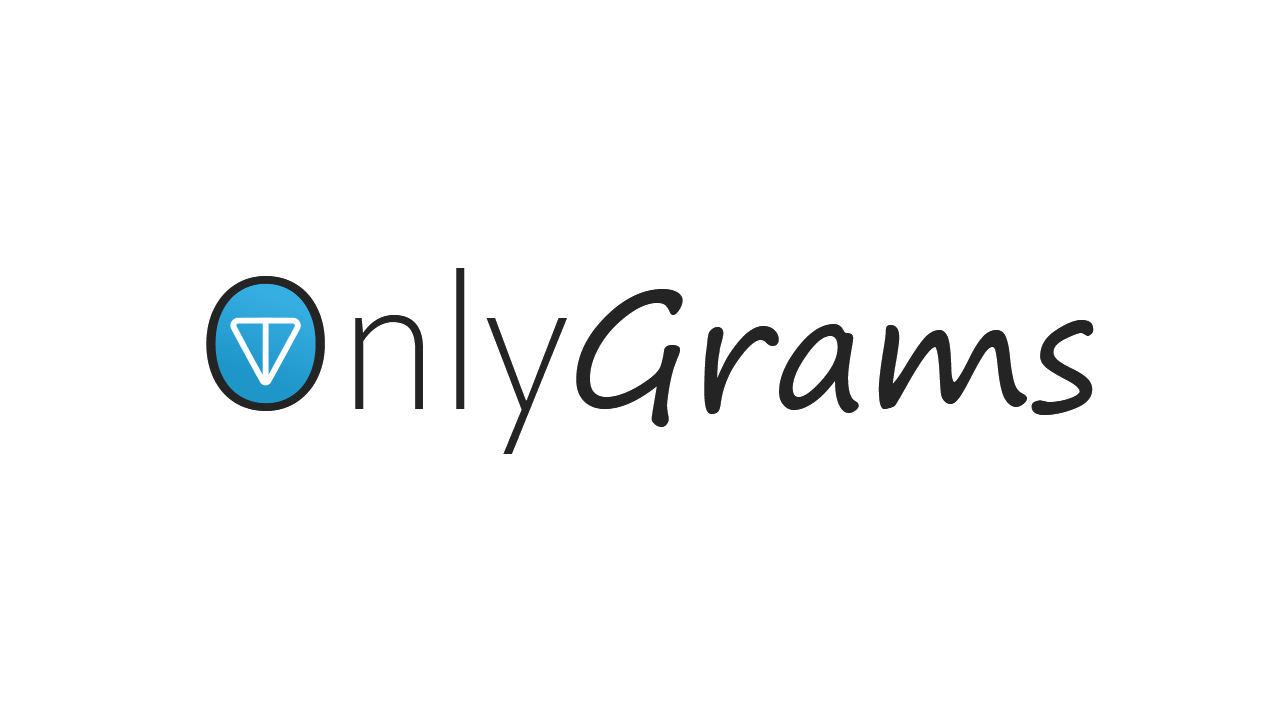
<style>
.page{position:relative;width:1280px;height:720px;background:#ffffff}
.page>*{position:absolute;margin:0}
.t1{font:200px "CorbelLight";color:#242424}
.t2{font:160px "SegoePrint";color:#242424}
</style>
<div class="page">
<p class="t1" style="left:206px;top:268px;width:361px;height:186px">Only</p>
<p class="t2" style="left:576px;top:289px;width:518px;height:138px">Grams</p>
</div>
